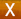
<style>
.page{position:relative;width:21px;height:19px}
.page>*{position:absolute;margin:0}
.t1{font:18px "Bahnschrift";color:#ffffff}
</style>
<div class="page">
<p class="t1" style="left:5px;top:3px;width:10px;height:14px">X</p>
</div>
